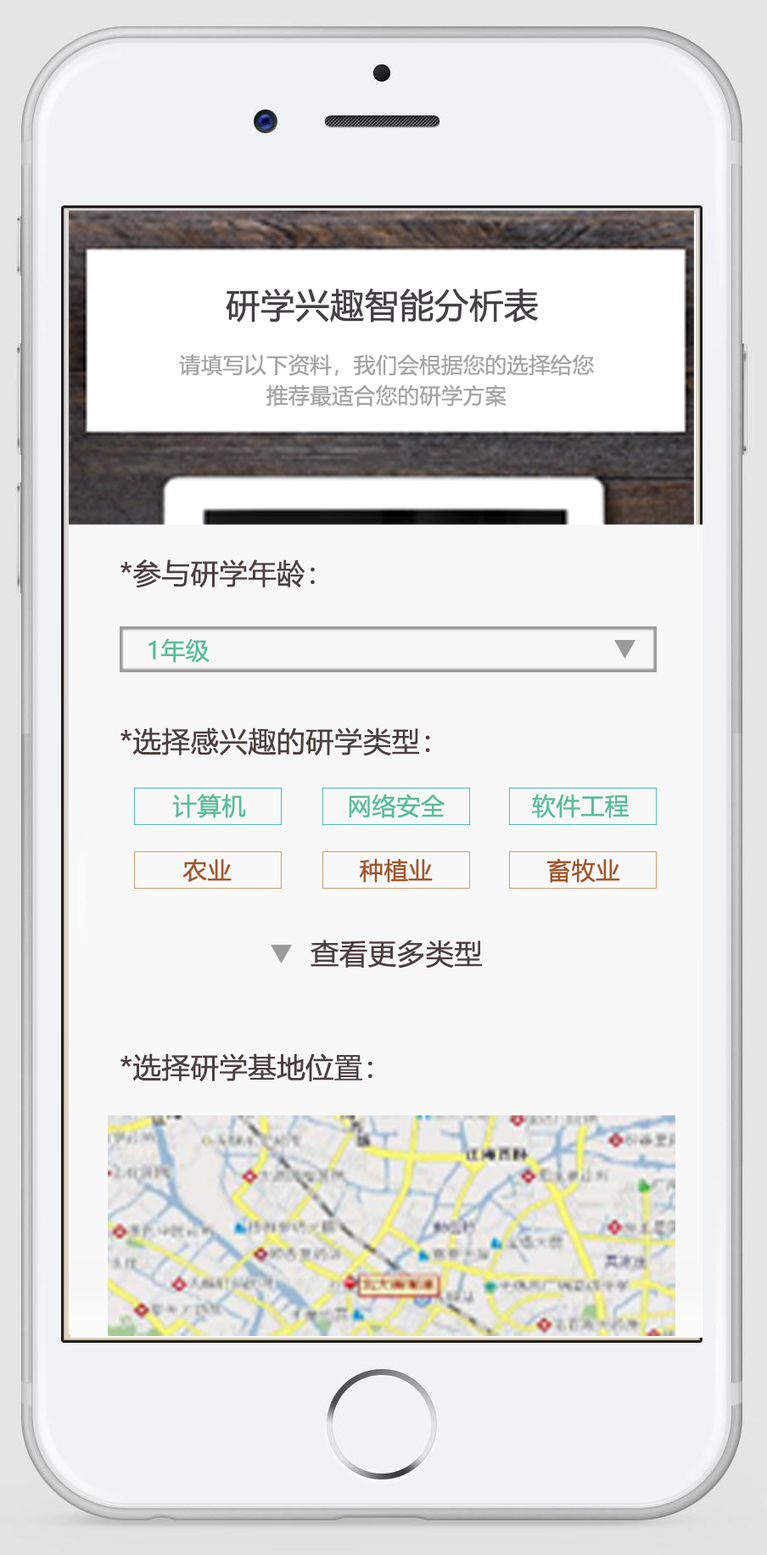
<style>
.page{position:relative;width:767px;height:1555px;background:#f8f8f8}
.page>*{position:absolute;margin:0}
.t1{font:34.2px "MicrosoftYaHei";letter-spacing:-0.01em;color:#444144;font-weight:bold}
.t2{font:21.5px/30.6px "MicrosoftYaHei";letter-spacing:-0.01em;color:#a4a4a4;font-weight:bold}
.t3{font:28.3px "MicrosoftYaHei";letter-spacing:-0.01em;color:#4c3f3d;font-weight:bold}
.t4{font:24px "MicrosoftYaHei";letter-spacing:-0.01em;color:#58bd9b;font-weight:bold}
.t5{font:24px "MicrosoftYaHei";letter-spacing:-0.01em;color:#a25629;font-weight:bold}
</style>
<div class="page">
<p class="t1" style="left:226px;top:289px;width:312px;height:33px">研学兴趣智能分析表</p>
<p class="t2" style="left:179px;top:354px;width:415px;height:52px;text-align:center">请填写以下资料，我们会根据您的选择给您推荐最适合您的研学方案</p>
<p class="t3" style="left:120px;top:559px;width:195px;height:29px">*参与研学年龄：</p>
<p class="t4" style="left:148px;top:638px;width:62px;height:25px">1年级</p>
<p class="t3" style="left:120px;top:727px;width:310px;height:29px">*选择感兴趣的研学类型：</p>
<p class="t4" style="left:172px;top:793px;width:74px;height:25px">计算机</p>
<p class="t4" style="left:349px;top:793px;width:96px;height:25px">网络安全</p>
<p class="t4" style="left:532px;top:793px;width:97px;height:25px">软件工程</p>
<p class="t5" style="left:360px;top:858px;width:73px;height:24px">种植业</p>
<p class="t5" style="left:547px;top:858px;width:73px;height:24px">畜牧业</p>
<p class="t5" style="left:182px;top:859px;width:50px;height:23px">农业</p>
<p class="t3" style="left:311px;top:939px;width:171px;height:29px">查看更多类型</p>
<p class="t3" style="left:120px;top:1053px;width:253px;height:28px">*选择研学基地位置：</p>
</div>
